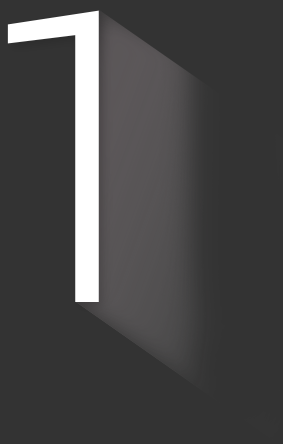
<style>
.page{position:relative;width:283px;height:444px;background:#333333}
.page>*{position:absolute;margin:0}
.t1{font:404px "Roboto-Light";color:#ffffff}
</style>
<div class="page">
<p class="t1" style="left:7px;top:10px;width:92px;height:292px">1</p>
</div>
